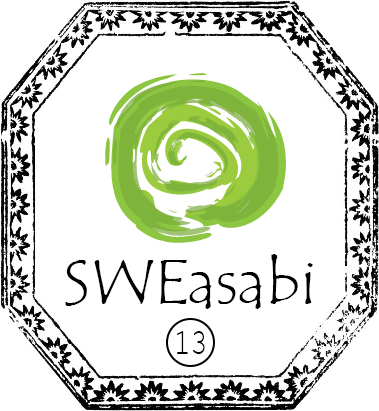
<style>
.page{position:relative;width:379px;height:411px;background:#ffffff}
.page>*{position:absolute;margin:0}
.t1{font:64px "TempusSansITC";color:#000000}
.t2{font:37px "CourierNewPSMT";color:#000000;scale:0.76 1}
</style>
<div class="page">
<p class="t1" style="left:65px;top:254px;width:248px;height:55px">SWEasabi</p>
<p class="t2" style="left:176px;top:331px;width:29px;height:23px">13</p>
</div>
